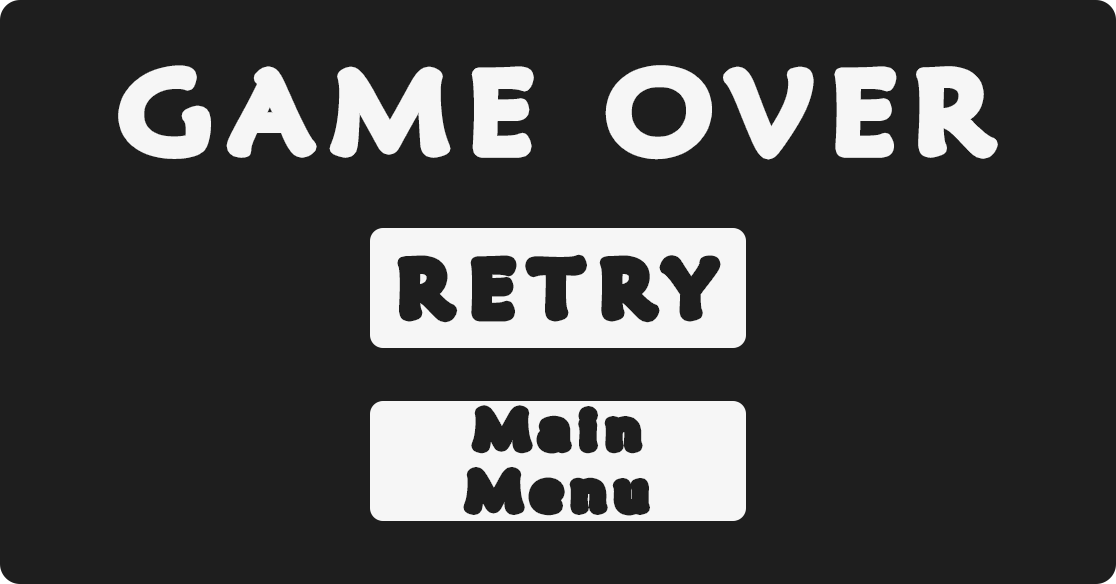
<style>
.page{position:relative;width:1116px;height:584px;background:#1e1e1e}
.page>*{position:absolute;margin:0}
.t1{font:110px "MaiandraGD-Regular";letter-spacing:0.14em;color:#f6f6f6;font-weight:bold;scale:1.11 1}
.t2{font:75px "MaiandraGD-Regular";letter-spacing:0.2em;color:#1e1e1e;font-weight:bold;scale:1.11 1}
.t3{font:50px/61.6px "MaiandraGD-Regular";letter-spacing:0.2em;color:#1e1e1e;font-weight:bold;scale:1.11 1}
</style>
<div class="page">
<p class="t1" style="left:124px;top:71px;width:868px;height:83px">GAME OVER</p>
<p class="t2" style="left:403px;top:260px;width:312px;height:57px">RETRY</p>
<p class="t3" style="left:469px;top:411px;width:175px;height:99px;text-align:center">Main<br>Menu</p>
</div>
